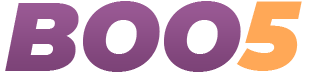
<style>
.page{position:relative;width:311px;height:72px;background:#ffffff}
.page>*{position:absolute;margin:0}
.t1{font:96.3px "Montserrat-BlackItalic";letter-spacing:-0.005em;color:#8b4e86}
.t2{font:96.3px "Montserrat-BlackItalic";letter-spacing:-0.005em;color:#ffa857}
</style>
<div class="page">
<p class="t1" style="left:5px;top:1px;width:236px;height:71px">BOO</p>
<p class="t2" style="left:236px;top:1px;width:66px;height:70px">5</p>
</div>
